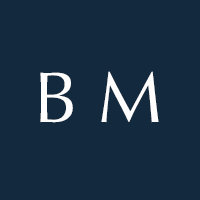
<style>
.page{position:relative;width:200px;height:200px;background:#13293d}
.page>*{position:absolute;margin:0}
.t1{font:72px "Optima-Regular";color:#fefefe}
</style>
<div class="page">
<p class="t1" style="left:40px;top:71px;width:119px;height:52px">B M</p>
</div>
